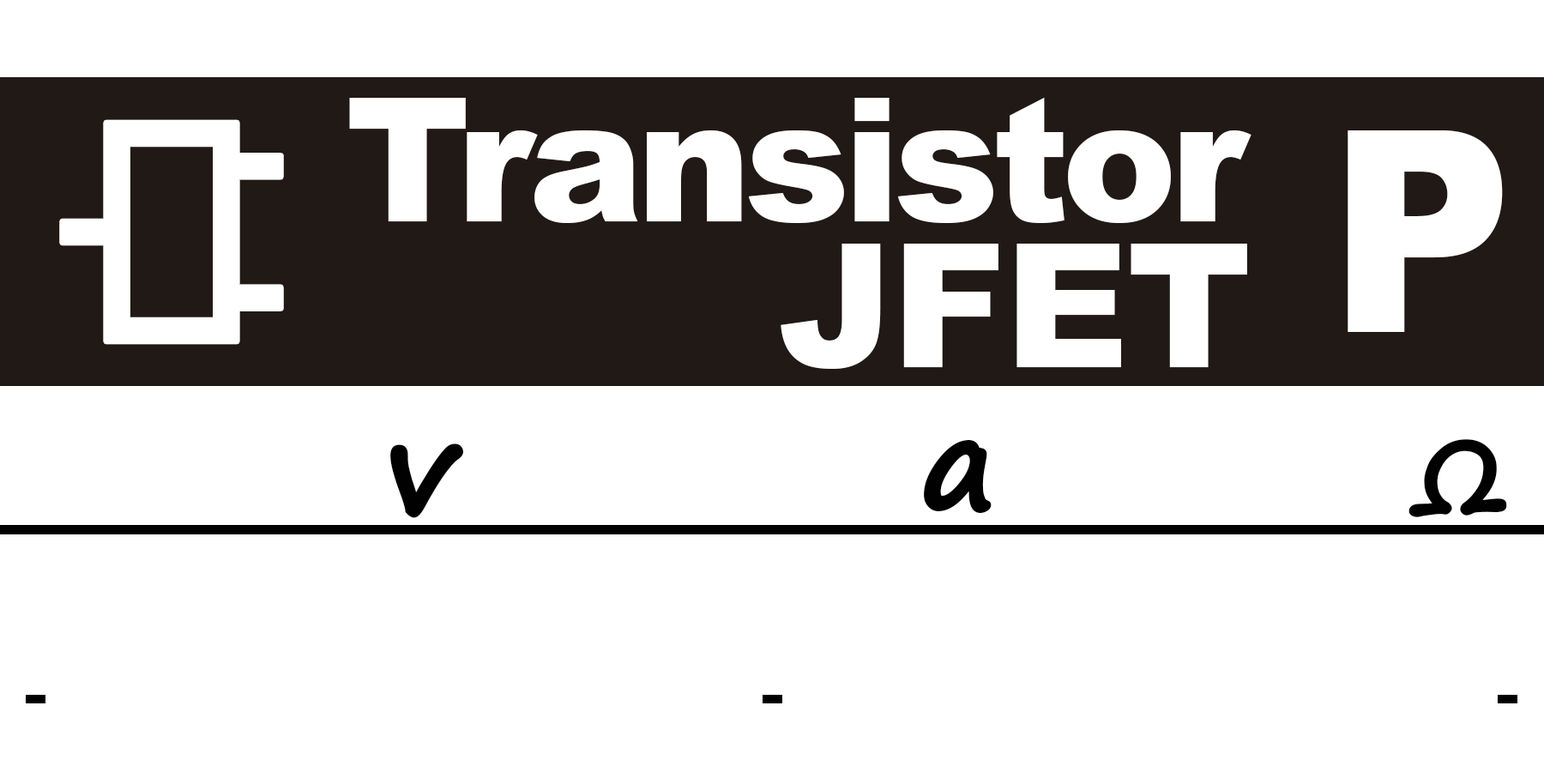
<style>
.page{position:relative;width:1544px;height:772px;background:#ffffff}
.page>*{position:absolute;margin:0}
.t1{font:172.5px/145.3px "Arial-Black";letter-spacing:-0.04em;color:#ffffff}
.t2{font:172.5px/145.3px "Arial-Black";letter-spacing:-0.01em;color:#ffffff}
.t3{font:281.5px "Arial-Black";letter-spacing:-0.01em;color:#ffffff;scale:0.9 1}
.t4{font:127.1px "SegoePrint-Bold";letter-spacing:-0.01em;color:#010101;font-weight:bold}
.t5{font:127.1px "Arial-BoldMT";letter-spacing:-0.01em;color:#010101}
.t6{font:99.9px "SegoePrint-Bold";letter-spacing:-0.01em;color:#010101;font-weight:bold}
</style>
<div class="page">
<p class="t1" style="left:349px;top:98px;width:903px;height:271px;text-align:right">Transistor<br><span class="t2">JFET</span></p>
<p class="t3" style="left:1348px;top:130px;width:155px;height:202px">P</p>
<p class="t4" style="left:390px;top:444px;width:74px;height:74px">v</p>
<p class="t4" style="left:924px;top:439px;width:68px;height:75px"><span class="t5">   </span>a</p>
<p class="t6" style="left:1409px;top:439px;width:98px;height:78px"><span class="t5"> </span>Ω</p>
</div>
